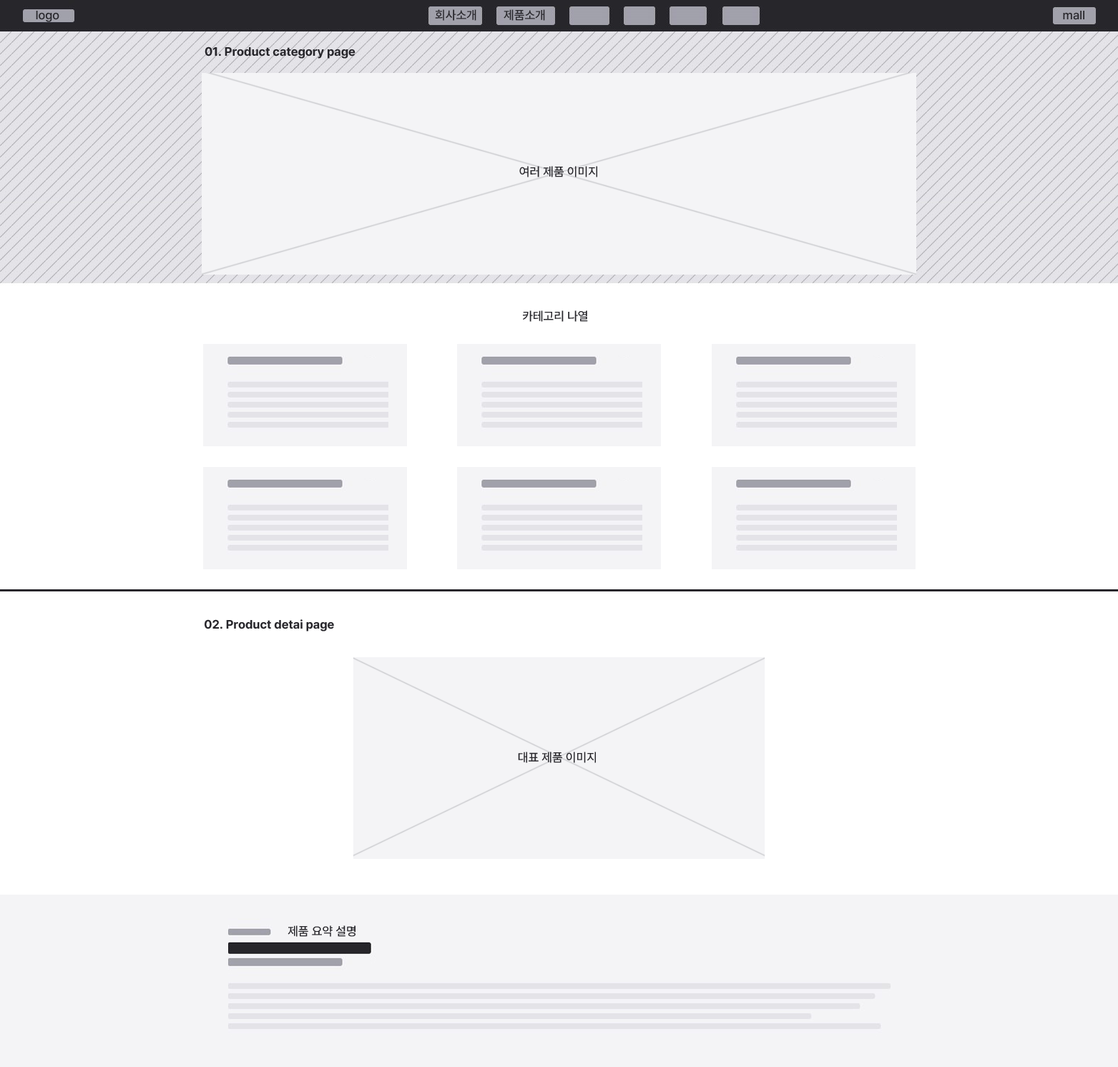
<style>
.page{position:relative;width:1118px;height:1067px;background:#ffffff}
.page>*{position:absolute;margin:0}
.t1{font:12.2px "Pretendard-Medium";color:#27262b}
.t2{font:12.2px "Pretendard-Bold";color:#27262b}
</style>
<div class="page">
<p class="t1" style="left:36px;top:11px;width:23px;height:11px">logo</p>
<p class="t1" style="left:435px;top:9px;width:41px;height:12px">회사소개</p>
<p class="t1" style="left:503px;top:9px;width:42px;height:12px">제품소개</p>
<p class="t1" style="left:1063px;top:11px;width:21px;height:9px">mall</p>
<p class="t2" style="left:205px;top:46px;width:150px;height:13px">01. Product category page</p>
<p class="t1" style="left:519px;top:166px;width:78px;height:11px">여러 제품 이미지</p>
<p class="t1" style="left:523px;top:310px;width:65px;height:12px">카테고리 나열</p>
<p class="t2" style="left:205px;top:619px;width:129px;height:12px">02. Product detai page</p>
<p class="t1" style="left:518px;top:752px;width:78px;height:11px">대표 제품 이미지</p>
<p class="t1" style="left:287px;top:925px;width:68px;height:12px">제품 요약 설명</p>
</div>
